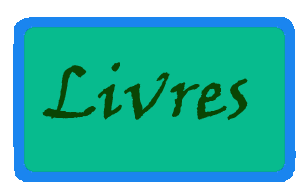
<style>
.page{position:relative;width:300px;height:190px;background:#07bb8e}
.page>*{position:absolute;margin:0}
.t1{font:72px "VinerHandITC";color:#0a4504}
</style>
<div class="page">
<p class="t1" style="left:42px;top:62px;width:206px;height:59px">Livres</p>
</div>
